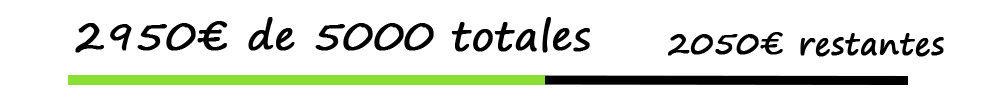
<style>
.page{position:relative;width:1000px;height:100px;background:#ffffff}
.page>*{position:absolute;margin:0}
.t1{font:40px "SegoePrint";color:#000000;font-weight:bold}
.t2{font:30px "SegoePrint";color:#000000;font-weight:bold}
</style>
<div class="page">
<p class="t1" style="left:75px;top:17px;width:515px;height:36px">2950€ de 5000 totales</p>
<p class="t2" style="left:668px;top:32px;width:276px;height:25px">2050€ restantes</p>
</div>
